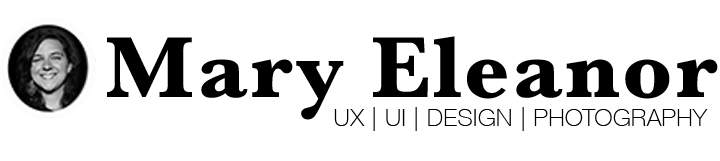
<style>
.page{position:relative;width:720px;height:161px;background:#ffffff}
.page>*{position:absolute;margin:0}
.t1{font:90px "Baskerville-Bold";letter-spacing:0.025em;color:#000000}
.t2{font:24px "HelveticaNeue-Thin";letter-spacing:0.025em;color:#000000}
.t3{font:18px "HelveticaNeue-Thin";letter-spacing:0.025em;color:#000000}
</style>
<div class="page">
<p class="t1" style="left:107px;top:36px;width:611px;height:84px">Mary Eleanor</p>
<p class="t2" style="left:334px;top:107px;width:374px;height:24px"><span class="t3"><br></span>UX | UI | DESIGN | PHOTOGRAPHY</p>
</div>
